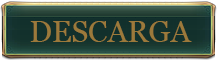
<style>
.page{position:relative;width:218px;height:60px}
.page>*{position:absolute;margin:0}
.t1{font:30px "Georgia";color:#9c793b}
</style>
<div class="page">
<p class="t1" style="left:30px;top:21px;width:162px;height:21px">DESCARGA</p>
</div>
